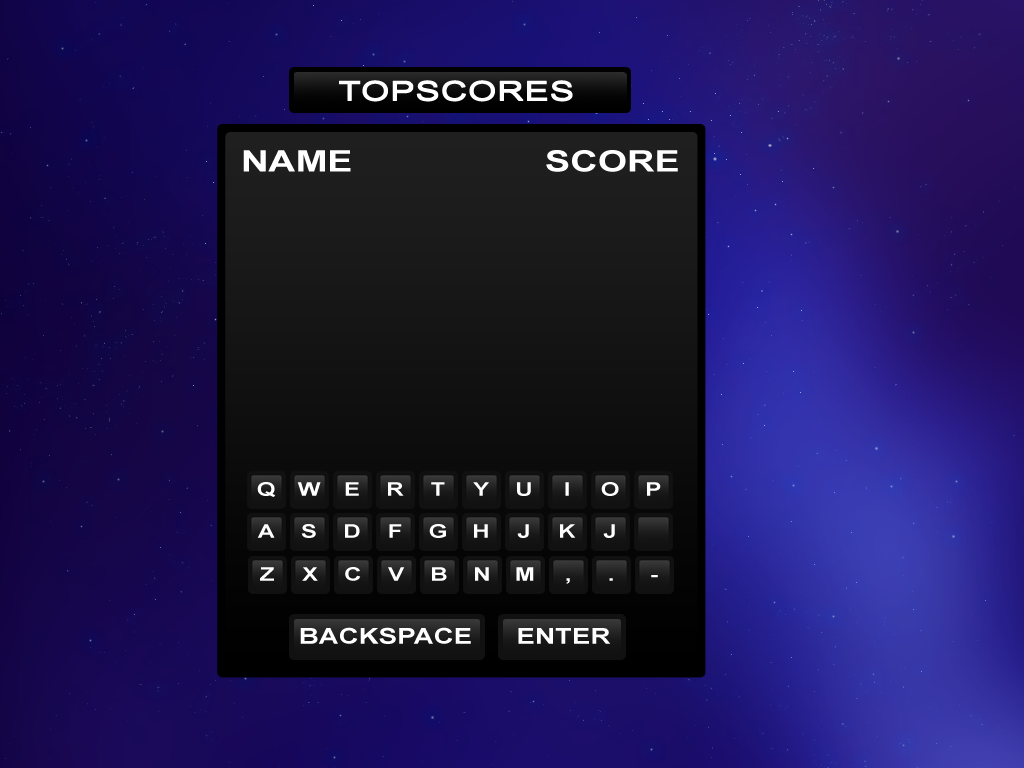
<style>
.page{position:relative;width:1024px;height:768px}
.page>*{position:absolute;margin:0}
.t1{font:29.8px "Arial-BoldMT";color:#ffffff;scale:1.27 1}
.t2{font:18.8px "Arial-BoldMT";color:#ffffff;scale:1.27 1}
.t3{font:21.8px "Arial-BoldMT";color:#ffffff;scale:1.27 1}
</style>
<div class="page">
<p class="t1" style="left:243px;top:150px;width:108px;height:22px">NAME</p>
<p class="t1" style="left:546px;top:150px;width:132px;height:22px">SCORE</p>
<p class="t2" style="left:257px;top:482px;width:19px;height:15px">Q</p>
<p class="t2" style="left:297px;top:482px;width:24px;height:14px">W</p>
<p class="t2" style="left:345px;top:482px;width:14px;height:14px">E</p>
<p class="t2" style="left:388px;top:482px;width:16px;height:14px">R</p>
<p class="t2" style="left:431px;top:482px;width:14px;height:14px">T</p>
<p class="t2" style="left:473px;top:482px;width:16px;height:14px">Y</p>
<p class="t2" style="left:517px;top:482px;width:14px;height:14px">U</p>
<p class="t2" style="left:565px;top:482px;width:4px;height:14px">I</p>
<p class="t2" style="left:601px;top:482px;width:18px;height:14px">O</p>
<p class="t2" style="left:647px;top:482px;width:14px;height:14px">P</p>
<p class="t2" style="left:257px;top:524px;width:18px;height:14px">A</p>
<p class="t2" style="left:301px;top:524px;width:15px;height:14px">S</p>
<p class="t2" style="left:345px;top:524px;width:15px;height:14px">D</p>
<p class="t2" style="left:389px;top:524px;width:13px;height:14px">F</p>
<p class="t2" style="left:429px;top:524px;width:17px;height:14px">G</p>
<p class="t2" style="left:474px;top:524px;width:14px;height:14px">H</p>
<p class="t2" style="left:517px;top:524px;width:12px;height:14px">J</p>
<p class="t2" style="left:560px;top:524px;width:16px;height:14px">K</p>
<p class="t2" style="left:603px;top:524px;width:12px;height:14px">J</p>
<p class="t2" style="left:260px;top:567px;width:14px;height:14px">Z</p>
<p class="t2" style="left:302px;top:567px;width:16px;height:14px">X</p>
<p class="t2" style="left:345px;top:567px;width:16px;height:14px">C</p>
<p class="t2" style="left:388px;top:567px;width:17px;height:14px">V</p>
<p class="t2" style="left:432px;top:567px;width:15px;height:14px">B</p>
<p class="t2" style="left:475px;top:567px;width:14px;height:14px">N</p>
<p class="t2" style="left:516px;top:567px;width:18px;height:14px">M</p>
<p class="t2" style="left:566px;top:578px;width:4px;height:6px">,</p>
<p class="t2" style="left:609px;top:578px;width:4px;height:3px">.</p>
<p class="t2" style="left:651px;top:575px;width:7px;height:3px">-</p>
<p class="t3" style="left:300px;top:627px;width:171px;height:17px">BACKSPACE</p>
<p class="t3" style="left:518px;top:628px;width:93px;height:16px">ENTER</p>
</div>
